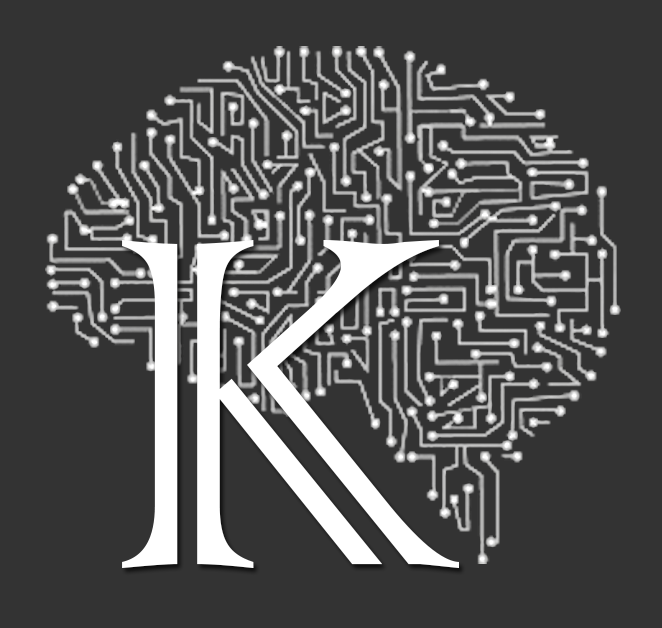
<style>
.page{position:relative;width:662px;height:628px;background:#333333}
.page>*{position:absolute;margin:0}
.t1{font:623.2px "ColonnaMT";letter-spacing:-0.05em;color:#ffffff;scale:0.89 1}
</style>
<div class="page">
<p class="t1" style="left:122px;top:240px;width:337px;height:328px">K</p>
</div>
